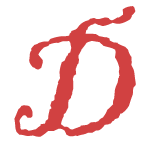
<style>
.page{position:relative;width:144px;height:144px;background:#ffffff}
.page>*{position:absolute;margin:0}
.t1{font:158px "BlackadderITC-Regular";color:#d14141;font-variant:small-caps}
</style>
<div class="page">
<p class="t1" style="left:14px;top:6px;width:122px;height:131px">D</p>
</div>
